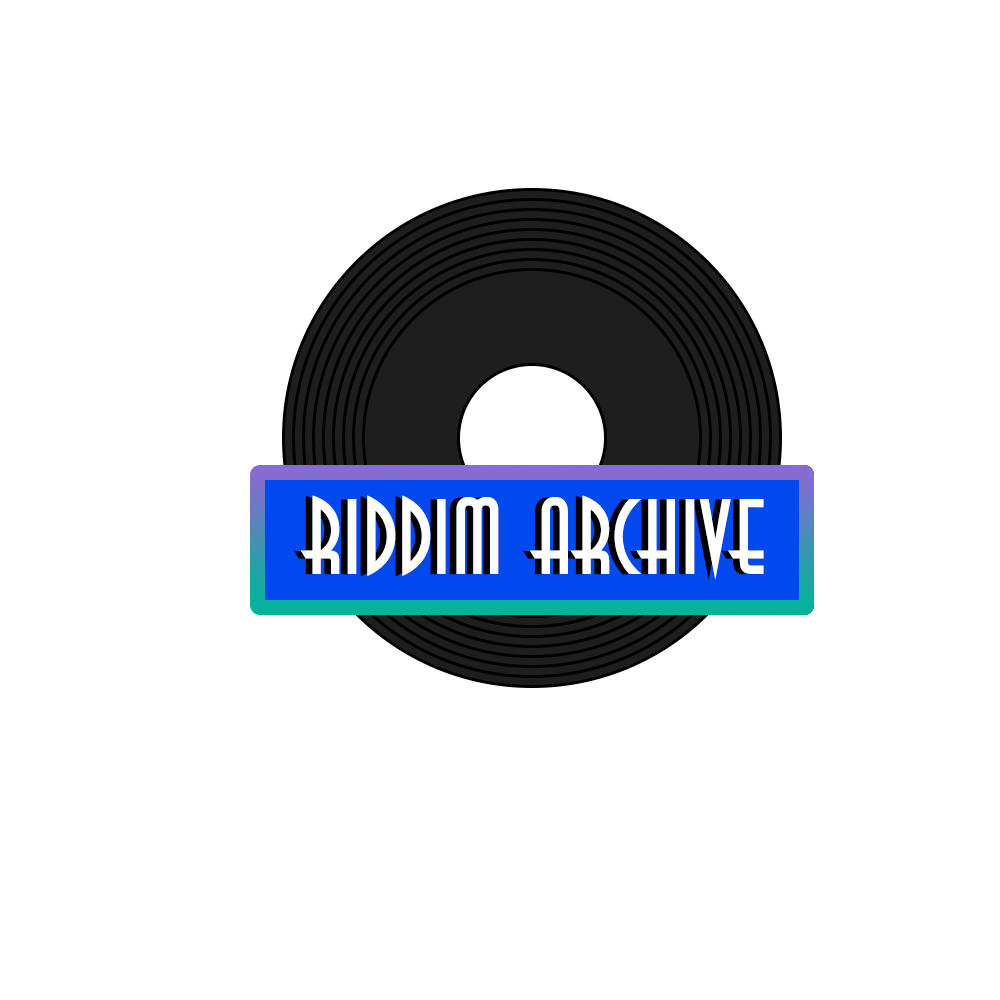
<style>
.page{position:relative;width:1000px;height:1000px;background:#ffffff}
.page>*{position:absolute;margin:0}
.t1{font:100px "Anastasia";color:#000000}
.t2{font:100px "Anastasia";color:#ffffff}
</style>
<div class="page">
<p class="t1" style="left:294px;top:496px;width:463px;height:84px">RIDDIM ARCHIVE</p>
<p class="t2" style="left:300px;top:495px;width:464px;height:85px">RIDDIM ARCHIVE</p>
</div>
